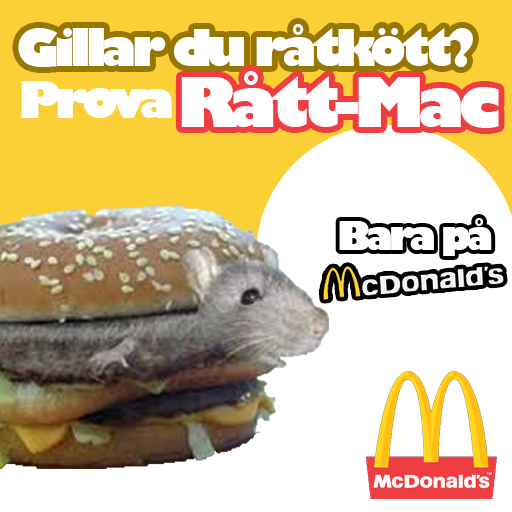
<style>
.page{position:relative;width:512px;height:512px;background:#ffffff}
.page>*{position:absolute;margin:0}
.t1{font:50px "GillSans-UltraBold";letter-spacing:-0.1em;color:#ffffff}
.t2{font:66.7px "GillSans-UltraBold";letter-spacing:-0.1em;color:#ffffff}
.t3{font:37.5px "GillSans-UltraBold";letter-spacing:-0.1em;color:#ffffff}
</style>
<div class="page">
<p class="t1" style="left:18px;top:24px;width:455px;height:43px">Gillar du råtkött?</p>
<p class="t2" style="left:181px;top:71px;width:318px;height:57px">Rått-Mac</p>
<p class="t1" style="left:21px;top:81px;width:151px;height:37px">Prova</p>
<p class="t3" style="left:339px;top:218px;width:153px;height:38px">Bara på</p>
</div>
